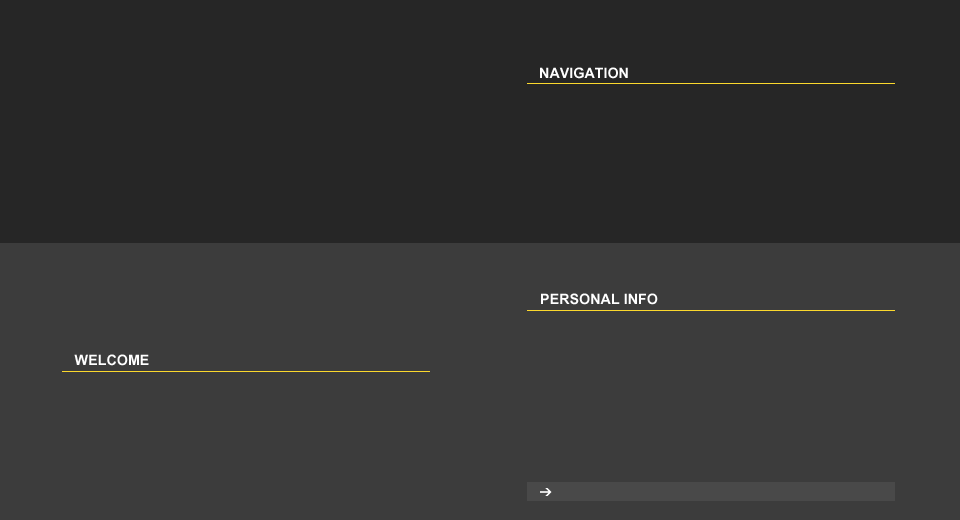
<style>
.page{position:relative;width:960px;height:520px;background:#3c3c3c}
.page>*{position:absolute;margin:0}
.t1{font:20px "Utsaah-Bold";color:#ffffff}
</style>
<div class="page">
<p class="t1" style="left:540px;top:67px;width:88px;height:12px">NAVIGATION</p>
<p class="t1" style="left:541px;top:293px;width:117px;height:12px">PERSONAL INFO</p>
<p class="t1" style="left:74px;top:354px;width:75px;height:12px">WELCOME</p>
</div>
